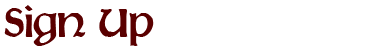
<style>
.page{position:relative;width:372px;height:50px;background:#ffffff}
.page>*{position:absolute;margin:0}
.t1{font:48px "Martel";color:#5a0000}
</style>
<div class="page">
<p class="t1" style="left:4px;top:5px;width:150px;height:41px">Sign Up</p>
</div>
